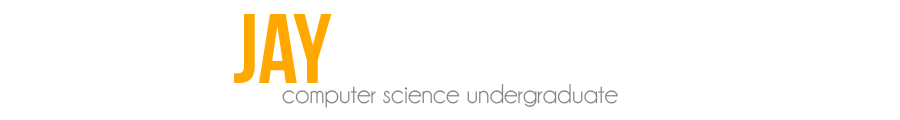
<style>
.page{position:relative;width:900px;height:120px;background:#ffffff}
.page>*{position:absolute;margin:0}
.t1{font:27px "Champagne&Limousines";color:#838383}
</style>
<div class="page">
<p class="t1" style="left:282px;top:84px;width:336px;height:24px">computer science undergraduate</p>
</div>
